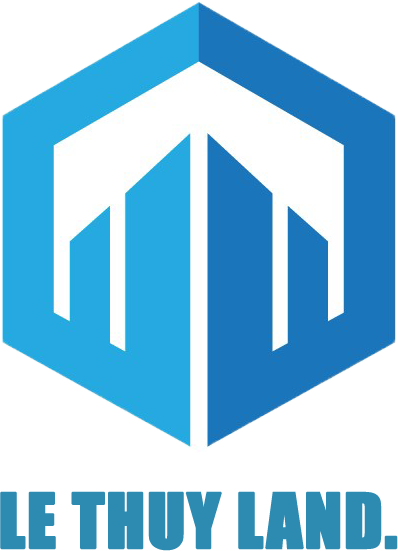
<style>
.page{position:relative;width:398px;height:551px;background:#ffffff}
.page>*{position:absolute;margin:0}
.t1{font:70px "Impact";color:#2d8ab1;font-weight:bold}
</style>
<div class="page">
<p class="t1" style="left:0px;top:491px;width:398px;height:60px">LE THUY LAND.</p>
</div>
